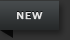
<style>
.page{position:relative;width:70px;height:40px}
.page>*{position:absolute;margin:0}
.t1{font:11px "Delicious-Roman";letter-spacing:0.025em;color:#e2e2e2;font-weight:bold;scale:1.29 1}
</style>
<div class="page">
<p class="t1" style="left:17px;top:12px;width:26px;height:8px">NEW</p>
</div>
